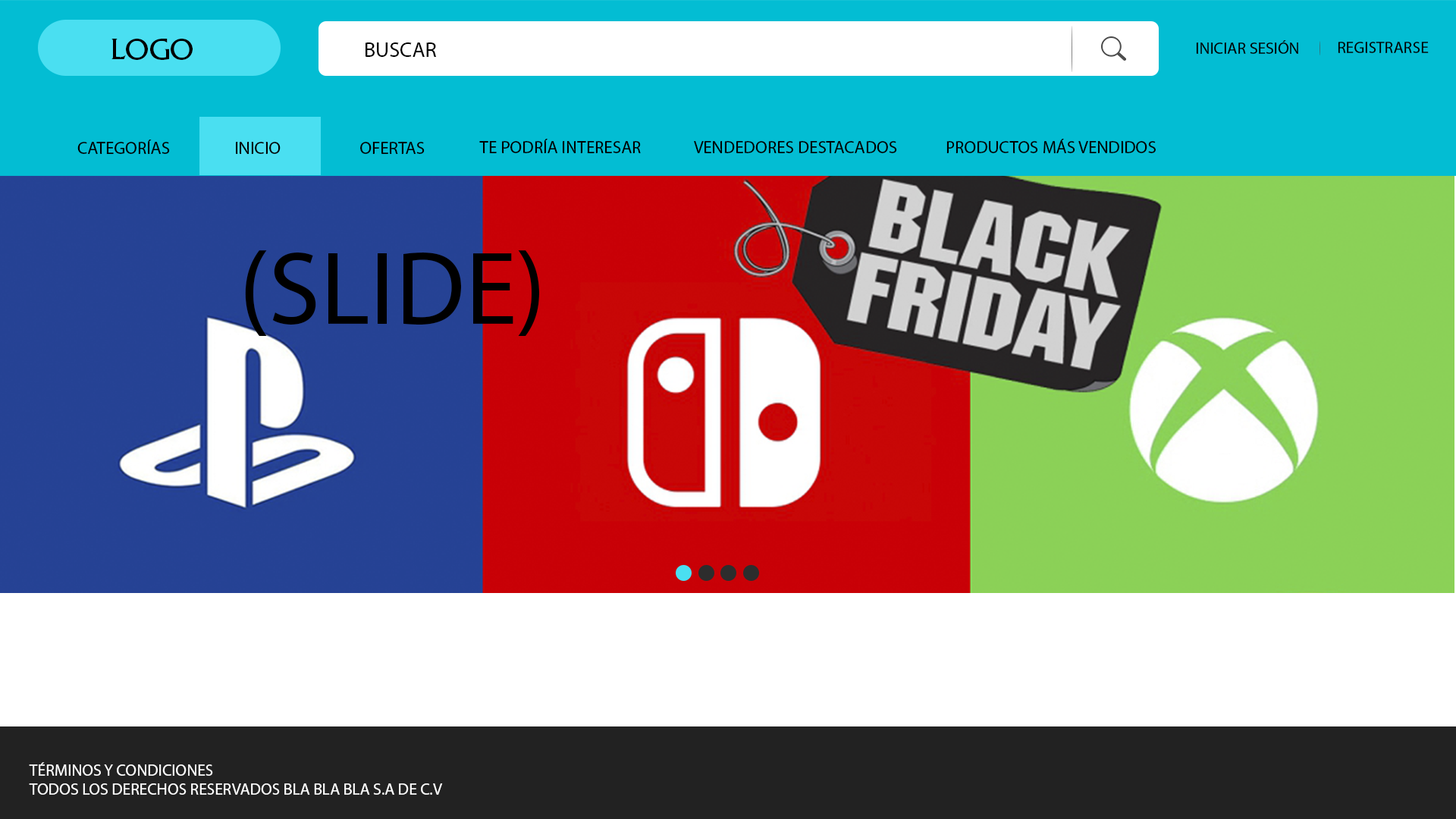
<style>
.page{position:relative;width:1456px;height:819px;background:#ffffff}
.page>*{position:absolute;margin:0}
.t1{font:30.4px "FrizQuadrataStd";color:#000000}
.t2{font:16.4px "MyriadPro-Regular";color:#000000}
.t3{font:21.2px "MyriadPro-Regular";color:#000000}
.t4{font:17.5px "MyriadPro-Regular";color:#000000}
.t5{font:105px "MyriadPro-Regular";color:#000000}
.t6{font:16.3px "MyriadPro-Regular";color:#ffffff}
</style>
<div class="page">
<p class="t1" style="left:111px;top:39px;width:82px;height:21px">LOGO</p>
<p class="t2" style="left:1196px;top:40px;width:102px;height:14px">INICIAR SESIÓN</p>
<p class="t2" style="left:1338px;top:42px;width:91px;height:11px">REGISTRARSE</p>
<p class="t3" style="left:366px;top:42px;width:71px;height:15px">BUSCAR</p>
<p class="t4" style="left:77px;top:140px;width:93px;height:14px">CATEGORÍAS</p>
<p class="t4" style="left:236px;top:142px;width:45px;height:12px">INICIO</p>
<p class="t4" style="left:360px;top:142px;width:65px;height:12px">OFERTAS</p>
<p class="t4" style="left:479px;top:139px;width:162px;height:14px">TE PODRÍA INTERESAR</p>
<p class="t4" style="left:694px;top:141px;width:203px;height:12px">VENDEDORES DESTACADOS</p>
<p class="t4" style="left:946px;top:139px;width:210px;height:14px">PRODUCTOS MÁS VENDIDOS</p>
<p class="t5" style="left:245px;top:250px;width:294px;height:86px">(SLIDE)</p>
<p class="t6" style="left:29px;top:762px;width:414px;height:33px">TÉRMINOS Y CONDICIONES<br>TODOS LOS DERECHOS RESERVADOS BLA BLA BLA S.A DE C.V</p>
</div>
